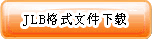
<style>
.page{position:relative;width:152px;height:39px;background:#ffffff}
.page>*{position:absolute;margin:0}
.t1{font:14px "SimSun";letter-spacing:0.05em;color:#000000;scale:0.9 1}
</style>
<div class="page">
<p class="t1" style="left:23px;top:13px;width:103px;height:13px">JLB格式文件下载</p>
</div>
